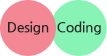
<style>
.page{position:relative;width:107px;height:56px;background:#f48794}
.page>*{position:absolute;margin:0}
.t1{font:14.3px "NanumGothicBold";letter-spacing:-0.035em;color:#282828}
</style>
<div class="page">
<p class="t1" style="left:8px;top:21px;width:41px;height:14px">Design</p>
<p class="t1" style="left:57px;top:21px;width:44px;height:14px">Coding</p>
</div>
